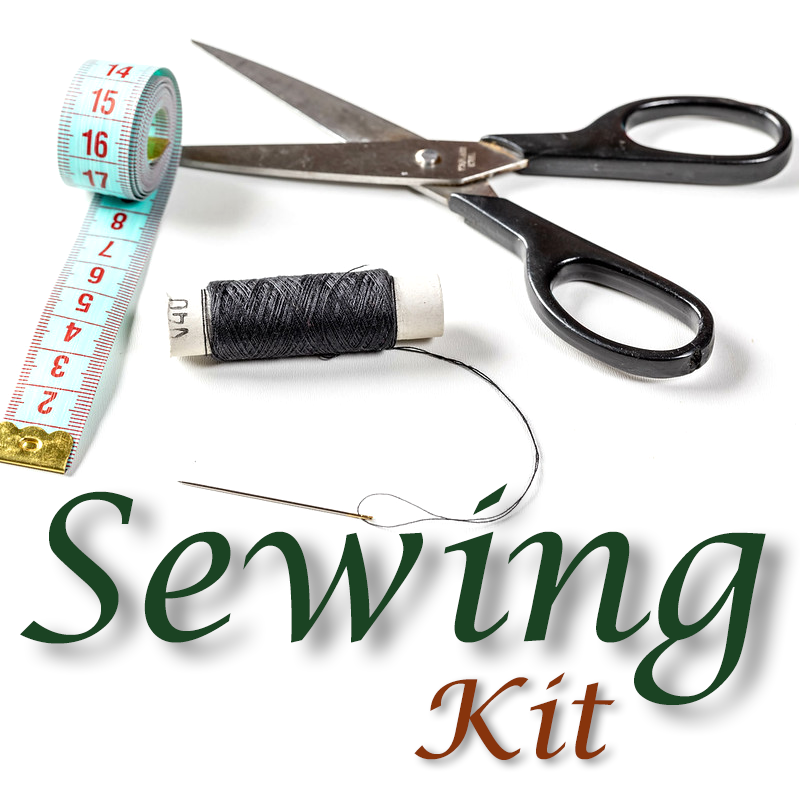
<style>
.page{position:relative;width:800px;height:800px;background:#ffffff}
.page>*{position:absolute;margin:0}
.t1{font:200px "LucidaCalligraphy-Italic";color:#1b4323}
.t2{font:109px "LucidaCalligraphy-Italic";color:#87340c}
</style>
<div class="page">
<p class="t1" style="left:20px;top:483px;width:746px;height:222px">Sewing</p>
<p class="t2" style="left:414px;top:672px;width:201px;height:88px">Kit</p>
</div>
